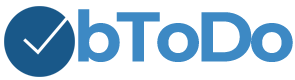
<style>
.page{position:relative;width:295px;height:80px;background:#ffffff}
.page>*{position:absolute;margin:0}
.t1{font:70.5px "Montserrat-Bold";letter-spacing:-0.075em;color:#3d89c4}
</style>
<div class="page">
<p class="t1" style="left:78px;top:9px;width:215px;height:53px">bToDo</p>
</div>
